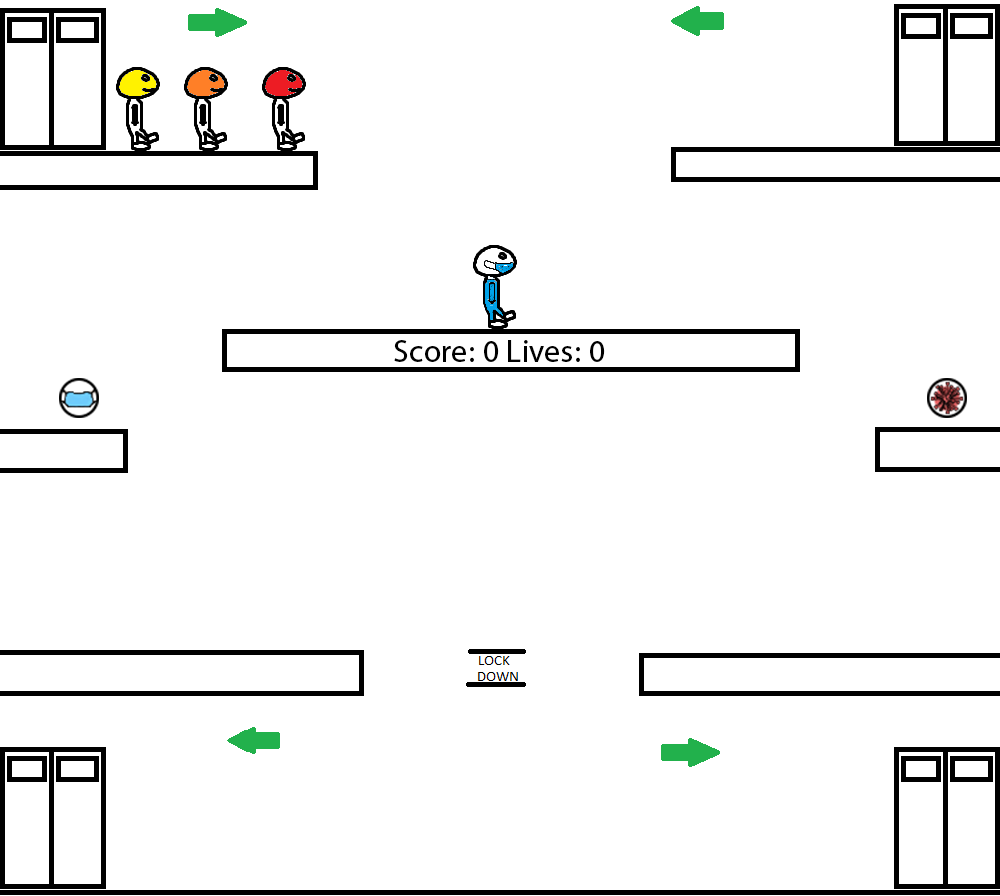
<style>
.page{position:relative;width:1000px;height:896px;background:#ffffff}
.page>*{position:absolute;margin:0}
.t1{font:32px "MyriadHebrew-Regular";color:#000000}
</style>
<div class="page">
<p class="t1" style="left:394px;top:340px;width:211px;height:22px">Score: 0 Lives: 0</p>
</div>
